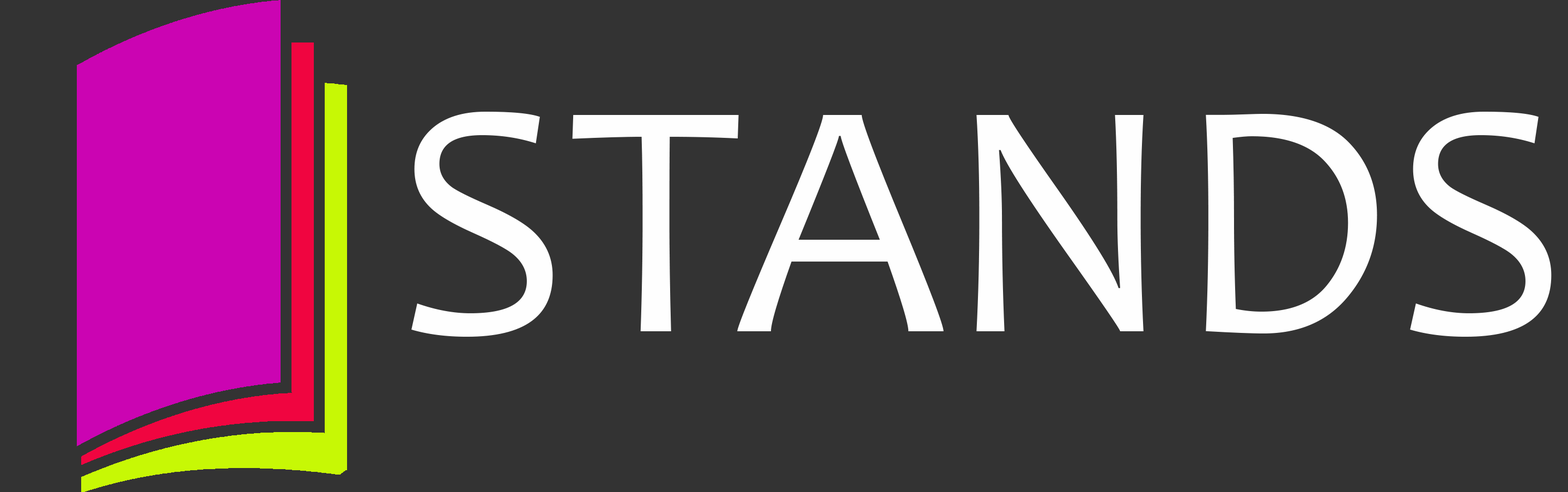
<style>
.page{position:relative;width:1568px;height:492px;background:#333333}
.page>*{position:absolute;margin:0}
.t1{font:340.5px "Candara";color:#fefefe}
</style>
<div class="page">
<p class="t1" style="left:411px;top:112px;width:1141px;height:225px">STANDS</p>
</div>
